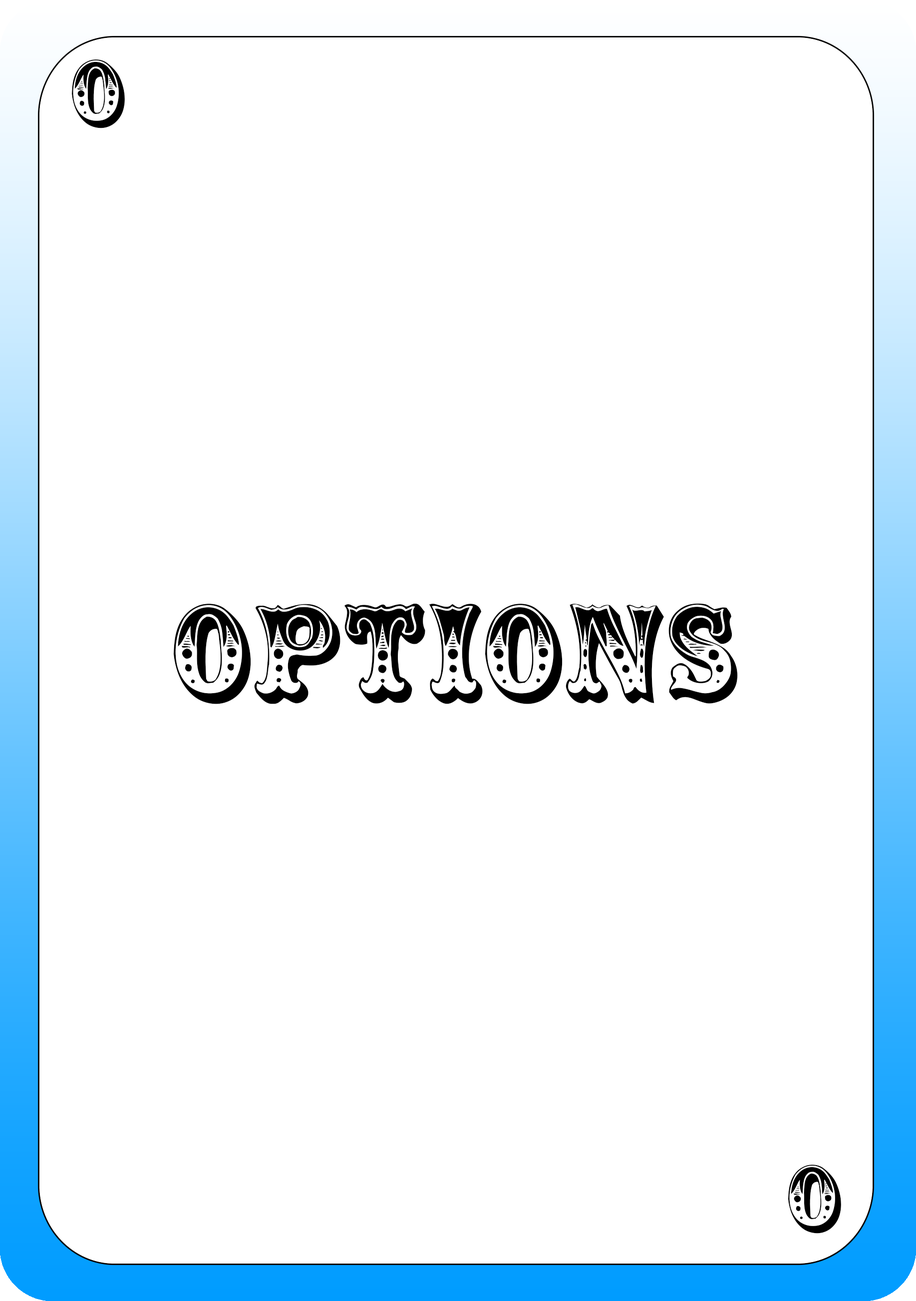
<style>
.page{position:relative;width:916px;height:1301px;background:#ffffff}
.page>*{position:absolute;margin:0}
.t1{font:85.2px "Circus";color:#000000}
.t2{font:124.9px "Circus";color:#000000}
</style>
<div class="page">
<p class="t1" style="left:72px;top:59px;width:53px;height:69px">O</p>
<p class="t2" style="left:174px;top:603px;width:564px;height:101px">OPTIONS</p>
<p class="t1" style="left:789px;top:1165px;width:53px;height:69px">O</p>
</div>
